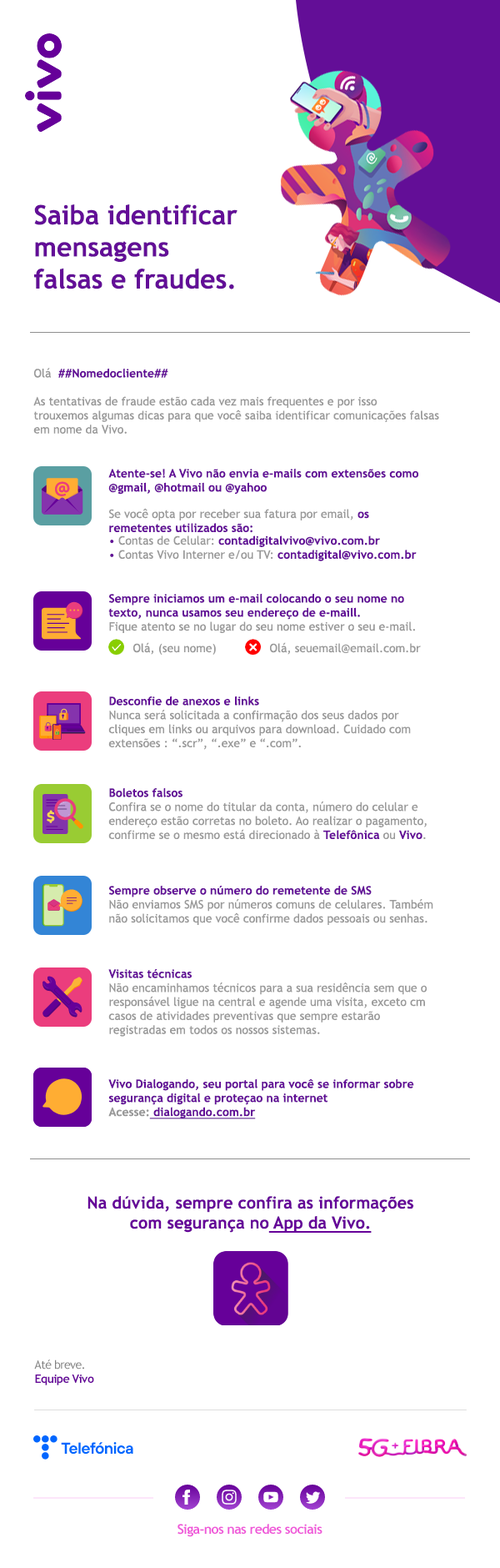
<style>
.page{position:relative;width:500px;height:1568px;background:#ffffff}
.page>*{position:absolute;margin:0}
.t1{font:26.7px "TrebuchetMS-Bold";color:#630e97}
.t2{font:11.7px "TrebuchetMS";color:#999999}
.t3{font:11.7px "TrebuchetMS-Bold";color:#630e97}
.t4{font:11.7px "TrebuchetMS";color:#630e97}
.t5{font:11.7px "TrebuchetMS-Bold";color:#650d99}
.t6{font:11.7px "TrebuchetMS-Bold";color:#640c97}
.t7{font:11.7px "TrebuchetMS-Bold";color:#999999}
.t8{font:11.7px "TrebuchetMS-Bold";color:#630e97;text-decoration:underline}
.t9{font:16.7px "TrebuchetMS-Bold";color:#660299}
.t10{font:16.7px "TrebuchetMS-Bold";color:#660299;text-decoration:underline}
.t11{font:11.7px "TrebuchetMS-Bold";letter-spacing:-0.04em;color:#660099}
.t12{font:11.7px "TrebuchetMS";letter-spacing:-0.04em;color:#828282}
.t13{font:13.3px "TrebuchetMS-Bold";letter-spacing:-0.04em;color:#ef58d9}
</style>
<div class="page">
<p class="t1" style="left:34px;top:204px;width:204px;height:85px">Saiba identificar<br>mensagens<br>falsas e fraudes.</p>
<p class="t2" style="left:33px;top:368px;width:407px;height:66px">Olá  <span class="t3">##Nomedocliente##<br><br></span>As tentativas de fraude estão cada vez mais frequentes e por isso <br>trouxemos algumas dicas para que você saiba identificar comunicações falsas<br>em nome da Vivo.</p>
<p class="t3" style="left:108px;top:468px;width:311px;height:27px">Atente-se! A Vivo não envia e-mails com extensões como<br>@gmail, @hotmail ou @yahoo</p>
<p class="t2" style="left:109px;top:508px;width:260px;height:25px">Se você opta por receber sua fatura por email,<span class="t3"> os<br>remetentes utilizados são:</span></p>
<p class="t2" style="left:110px;top:535px;width:307px;height:26px"><span class="t4">•</span> Contas de Celular:<span class="t3"> contadigitalvivo@vivo.com.br<br></span><span class="t4">•</span> Contas Vivo Interner e/ou TV: <span class="t3">contadigital@vivo.com.br</span></p>
<p class="t3" style="left:108px;top:593px;width:307px;height:40px">Sempre iniciamos um e-mail colocando o seu nome no<br>texto, nunca usamos seu endereço de e-maill.<br><span class="t2">Fique atento se no lugar do seu nome estiver o seu e-mail.</span></p>
<p class="t2" style="left:133px;top:642px;width:83px;height:13px">Olá, (seu nome)</p>
<p class="t2" style="left:270px;top:642px;width:151px;height:13px">Olá, seuemail@email.com.br</p>
<p class="t2" style="left:108px;top:696px;width:303px;height:54px"><span class="t3">Desconfie de anexos e links<br></span>Nunca será solicitada a confirmação dos seus dados por<br>cliques em links ou arquivos para download. Cuidado com<br>extensões : “.scr”, “.exe” e “.com”.</p>
<p class="t2" style="left:108px;top:787px;width:319px;height:52px"><span class="t3">Boletos falsos<br></span>Confira se o nome do titular da conta, número do celular e<br>endereço estão corretas no boleto. Ao realizar o pagamento,<br>confirme se o mesmo está direcionado à <span class="t5">Telefônica</span> ou <span class="t6">Vivo</span>.</p>
<p class="t2" style="left:109px;top:885px;width:325px;height:40px"><span class="t3">Sempre observe o número do remetente de SMS<br></span>Não enviamos SMS por números comuns de celulares. Também<br>não solicitamos que você confirme dados pessoais ou senhas.</p>
<p class="t2" style="left:108px;top:969px;width:319px;height:68px"><span class="t3">Visitas técnicas<br></span>Não encaminhamos técnicos para a sua residência sem que o<br>responsável ligue na central e agende uma visita, exceto cm<br>casos de atividades preventivas que sempre estarão<br>registradas em todos os nossos sistemas.</p>
<p class="t3" style="left:108px;top:1078px;width:307px;height:41px">Vivo Dialogando, seu portal para você se informar sobre<br>segurança digital e proteçao na internet<br><span class="t7">Acesse:</span><span class="t8"> dialogando.com.br</span></p>
<p class="t9" style="left:88px;top:1196px;width:327px;height:37px;text-align:center">Na dúvida, sempre confira as informações<br>com segurança no<span class="t10"> App da Vivo.</span></p>
<p class="t11" style="left:34px;top:1359px;width:60px;height:26px"><span class="t12">Até breve.<br></span>Equipe Vivo</p>
<p class="t13" style="left:178px;top:1524px;width:145px;height:13px">Siga-nos nas redes sociais</p>
</div>
